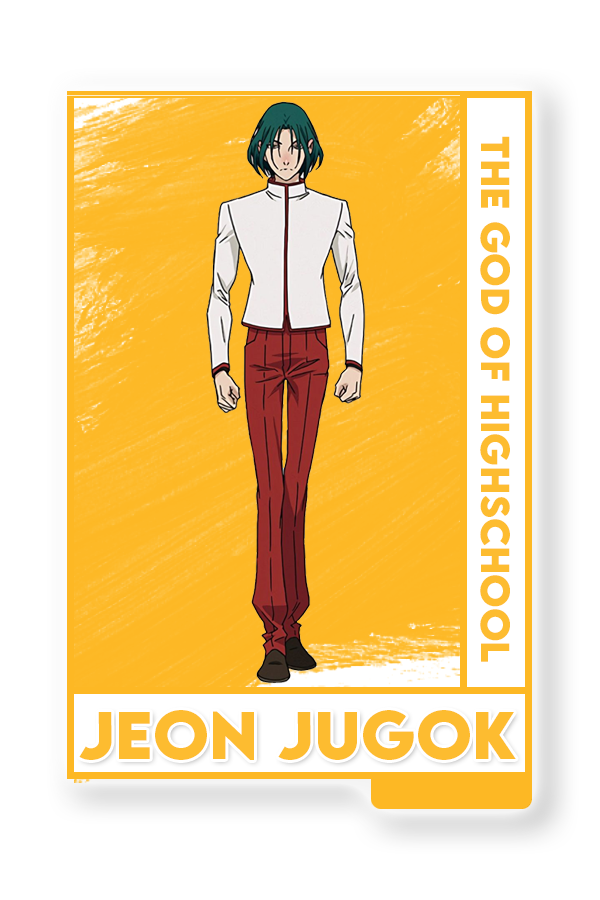
<style>
.page{position:relative;width:600px;height:900px;background:#ffffff}
.page>*{position:absolute;margin:0}
.t1{font:36px "LEMONMILK-Bold";color:#fdbc30}
.t2{font:60.3px "LEMONMILK-Bold";color:#fdbc30}
</style>
<div class="page">
<p class="t1" style="left:480px;top:136px;width:30px;height:526px;rotate:90deg">the god of highschool</p>
<p class="t2" style="left:79px;top:710px;width:437px;height:50px">JEON JUGOK</p>
</div>
